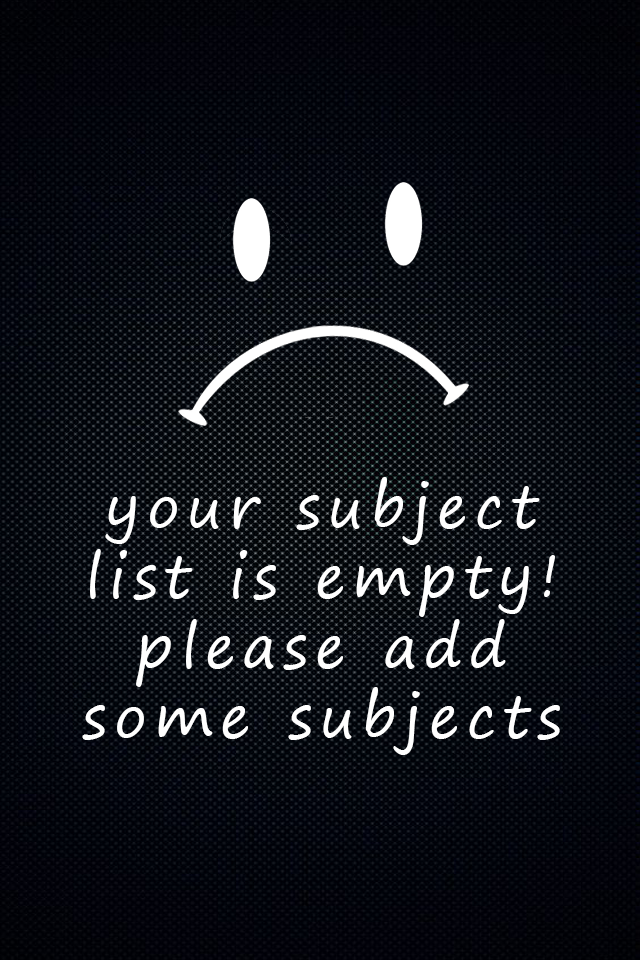
<style>
.page{position:relative;width:640px;height:960px}
.page>*{position:absolute;margin:0}
.t1{font:58.3px "SegoePrint";letter-spacing:0.12em;color:#ffffff}
</style>
<div class="page">
<p class="t1" style="left:82px;top:477px;width:478px;height:278px;text-align:center">your subject list is empty!<br>please add some subjects</p>
</div>
